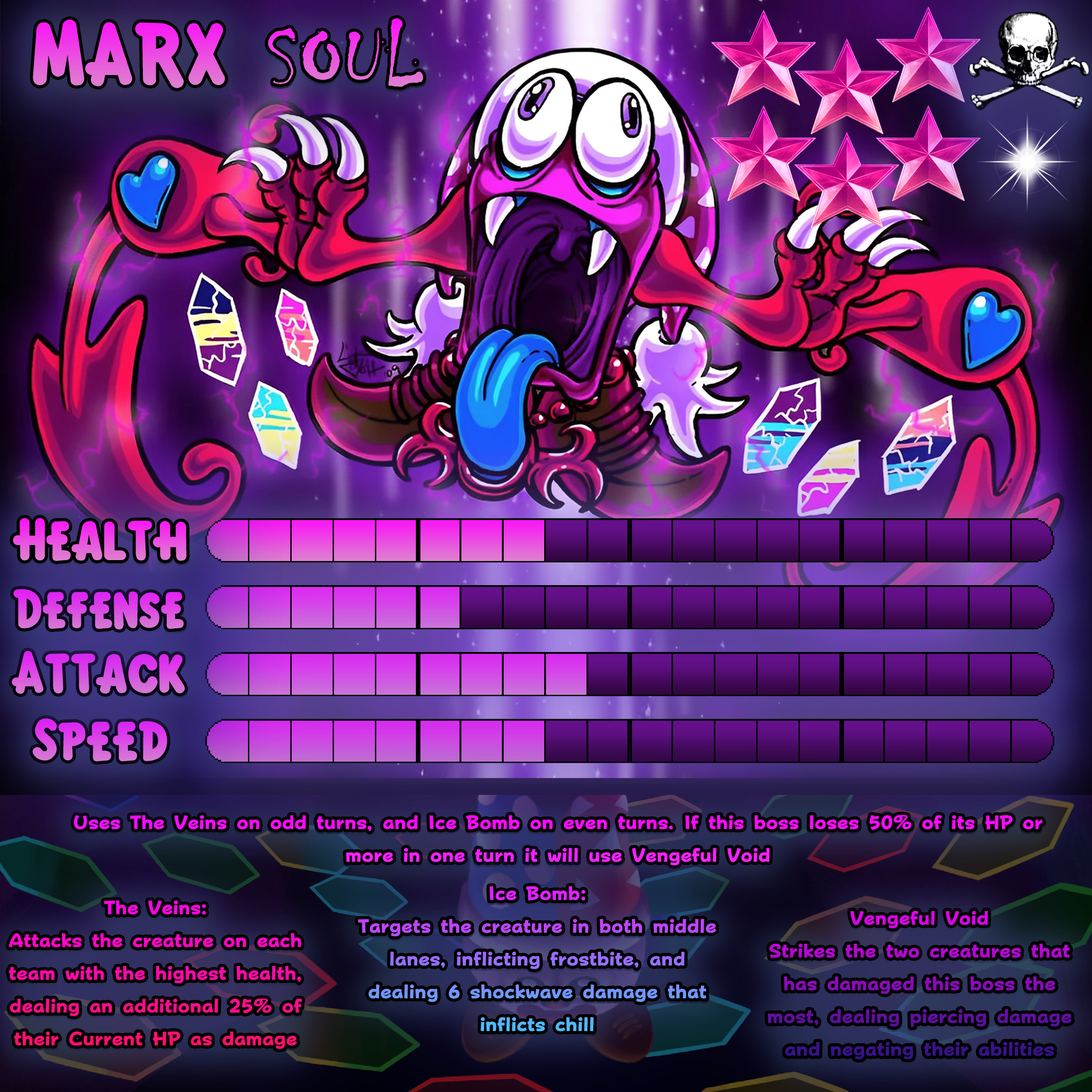
<style>
.page{position:relative;width:1092px;height:1092px}
.page>*{position:absolute;margin:0}
.t1{font:136px "KirbyClassic"}
.t2{font:162px "Chiller-Regular"}
.t3{font:91px "KirbyClassic"}
.t4{font:84.6px "KirbyClassic"}
.t5{font:32.8px "FOTPopHappinessStrp-ExtraBold";color:#fb0cfd}
.t6{font:32.8px/32.8px "FOTPopHappinessStrp-ExtraBold"}
</style>
<div class="page">
<p class="t1" style="left:33px;top:18px;width:390px;height:70px">MARX <span class="t2">SOUL</span></p>
<p class="t3" style="left:13px;top:518px;width:174px;height:43px">Health</p>
<p class="t4" style="left:13px;top:589px;width:171px;height:41px">Defense</p>
<p class="t3" style="left:12px;top:651px;width:173px;height:43px">Attack</p>
<p class="t3" style="left:32px;top:718px;width:135px;height:44px">Speed</p>
<p class="t5" style="left:74px;top:815px;width:969px;height:50px">Uses The Veins on odd turns, and Ice Bomb on even turns. If this boss loses 50% of its HP or more in one turn it will use Vengeful Void</p>
<p class="t6" style="left:358px;top:886px;width:358px;height:145px;text-align:center">Ice Bomb:<br>Targets the creature in both middle lanes, inflicting frostbite, and dealing 6 shockwave damage that inflicts chill</p>
<p class="t6" style="left:9px;top:900px;width:293px;height:149px;text-align:center">The Veins:<br>Attacks the creature on each team with the highest health, dealing an additional 25% of their Current HP as damage</p>
<p class="t6" style="left:768px;top:911px;width:304px;height:149px;text-align:center">Vengeful Void<br>Strikes the two creatures that has damaged this boss the most, dealing piercing damage and negating their abilities</p>
</div>
